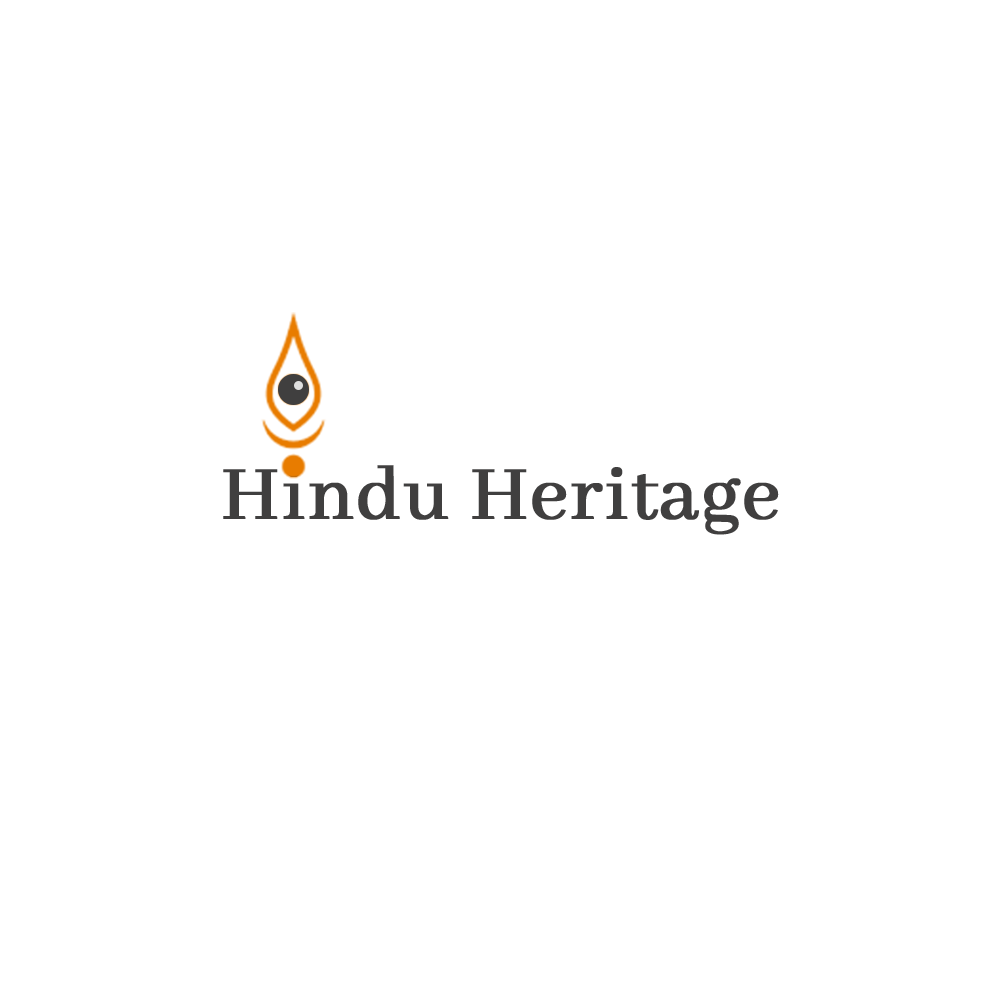
<style>
.page{position:relative;width:1000px;height:1000px;background:#ffffff}
.page>*{position:absolute;margin:0}
.t1{font:83.3px "AbhayaLibre-Regular";color:#403f3f;font-weight:bold}
</style>
<div class="page">
<p class="t1" style="left:223px;top:465px;width:556px;height:70px">Hindu Heritage</p>
</div>
